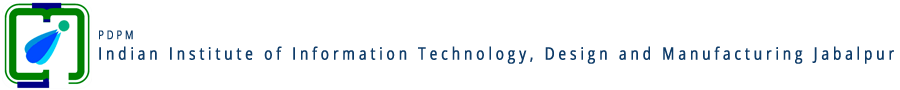
<style>
.page{position:relative;width:900px;height:90px;background:#ffffff}
.page>*{position:absolute;margin:0}
.t1{font:17px "OpenSans";letter-spacing:0.261em;color:#0f3c69;font-weight:bold;scale:0.8 1}
.t2{font:12px "OpenSans";letter-spacing:0.261em;color:#0f3c69;font-weight:bold;scale:0.8 1}
</style>
<div class="page">
<p class="t1" style="left:99px;top:30px;width:795px;height:34px;text-align:justify"><span class="t2">PDPM<br></span>Indian Institute of Information Technology, Design and Manufacturing Jabalpur</p>
</div>
